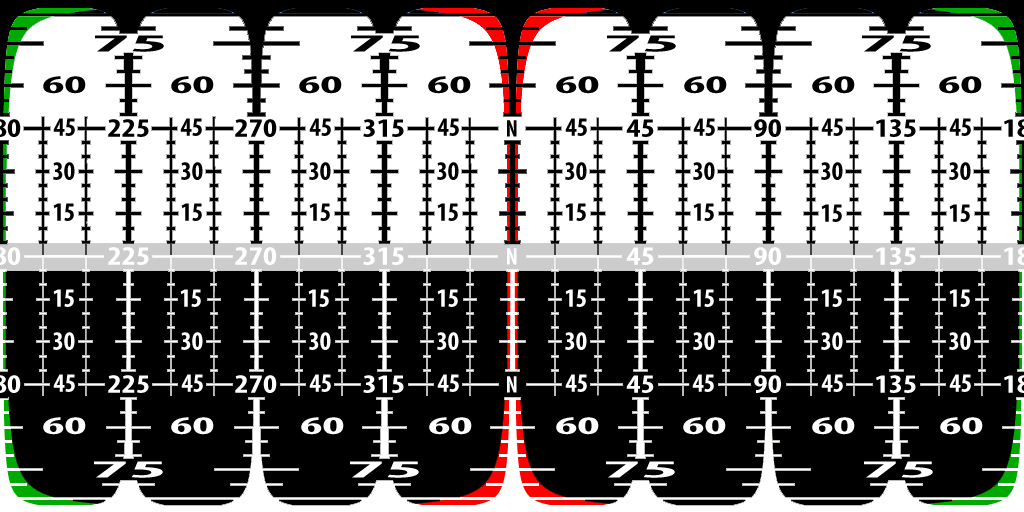
<style>
.page{position:relative;width:1024px;height:512px;background:#000000}
.page>*{position:absolute;margin:0}
.t1{font:24.5px "MyriadPro-BoldCond";color:#000000;scale:3.67 1}
.t2{font:25.5px "MyriadPro-BoldCond";color:#000000;scale:2.06 1}
.t3{font:26.4px "MyriadPro-BoldCond";color:#000000}
.t4{font:26.4px "MyriadPro-BoldCond";color:#000000;scale:1.26 1}
.t5{font:24px "MyriadPro-BoldCond";color:#000000}
.t6{font:26.4px "MyriadPro-BoldCond";color:#ffffff;scale:1.26 1}
.t7{font:24px "MyriadPro-BoldCond";color:#ffffff}
.t8{font:26.4px "MyriadPro-BoldCond";color:#ffffff}
.t9{font:25.5px "MyriadPro-BoldCond";color:#ffffff;scale:2.06 1}
.t10{font:24.5px "MyriadPro-BoldCond";color:#ffffff;scale:3.67 1}
</style>
<div class="page">
<p class="t1" style="left:95px;top:35px;width:69px;height:17px">75</p>
<p class="t1" style="left:351px;top:35px;width:69px;height:17px">75</p>
<p class="t1" style="left:607px;top:35px;width:69px;height:17px">75</p>
<p class="t1" style="left:862px;top:35px;width:69px;height:17px">75</p>
<p class="t2" style="left:43px;top:76px;width:43px;height:18px">60</p>
<p class="t2" style="left:171px;top:76px;width:43px;height:18px">60</p>
<p class="t2" style="left:299px;top:76px;width:43px;height:18px">60</p>
<p class="t2" style="left:428px;top:76px;width:43px;height:18px">60</p>
<p class="t2" style="left:556px;top:76px;width:43px;height:18px">60</p>
<p class="t2" style="left:684px;top:76px;width:43px;height:18px">60</p>
<p class="t2" style="left:812px;top:76px;width:43px;height:18px">60</p>
<p class="t2" style="left:939px;top:76px;width:43px;height:18px">60</p>
<p class="t3" style="left:53px;top:118px;width:22px;height:18px">45</p>
<p class="t4" style="left:108px;top:119px;width:41px;height:18px">225</p>
<p class="t3" style="left:180px;top:118px;width:22px;height:18px">45</p>
<p class="t4" style="left:235px;top:119px;width:42px;height:18px">270</p>
<p class="t3" style="left:309px;top:118px;width:22px;height:18px">45</p>
<p class="t4" style="left:363px;top:119px;width:41px;height:18px">315</p>
<p class="t3" style="left:437px;top:118px;width:22px;height:18px">45</p>
<p class="t5" style="left:507px;top:120px;width:10px;height:17px">N</p>
<p class="t3" style="left:565px;top:118px;width:22px;height:18px">45</p>
<p class="t4" style="left:626px;top:119px;width:28px;height:18px">45</p>
<p class="t3" style="left:693px;top:118px;width:22px;height:18px">45</p>
<p class="t4" style="left:754px;top:119px;width:27px;height:18px">90</p>
<p class="t3" style="left:821px;top:118px;width:22px;height:18px">45</p>
<p class="t4" style="left:876px;top:119px;width:40px;height:18px">135</p>
<p class="t3" style="left:949px;top:118px;width:22px;height:18px">45</p>
<p class="t3" style="left:53px;top:162px;width:22px;height:18px">30</p>
<p class="t3" style="left:181px;top:162px;width:22px;height:18px">30</p>
<p class="t3" style="left:309px;top:162px;width:22px;height:18px">30</p>
<p class="t3" style="left:437px;top:162px;width:22px;height:18px">30</p>
<p class="t3" style="left:565px;top:162px;width:22px;height:18px">30</p>
<p class="t3" style="left:693px;top:162px;width:22px;height:18px">30</p>
<p class="t3" style="left:821px;top:162px;width:22px;height:18px">30</p>
<p class="t3" style="left:949px;top:162px;width:22px;height:18px">30</p>
<p class="t3" style="left:53px;top:203px;width:21px;height:18px">15</p>
<p class="t3" style="left:181px;top:203px;width:21px;height:18px">15</p>
<p class="t3" style="left:309px;top:203px;width:21px;height:18px">15</p>
<p class="t3" style="left:437px;top:203px;width:21px;height:18px">15</p>
<p class="t3" style="left:565px;top:203px;width:21px;height:18px">15</p>
<p class="t3" style="left:693px;top:203px;width:21px;height:18px">15</p>
<p class="t3" style="left:821px;top:204px;width:21px;height:18px">15</p>
<p class="t3" style="left:949px;top:204px;width:21px;height:18px">15</p>
<p class="t6" style="left:108px;top:247px;width:41px;height:18px">225</p>
<p class="t6" style="left:235px;top:247px;width:42px;height:18px">270</p>
<p class="t6" style="left:363px;top:247px;width:41px;height:18px">315</p>
<p class="t7" style="left:507px;top:248px;width:10px;height:17px">N</p>
<p class="t6" style="left:626px;top:247px;width:28px;height:18px">45</p>
<p class="t6" style="left:754px;top:247px;width:27px;height:18px">90</p>
<p class="t6" style="left:876px;top:247px;width:40px;height:18px">135</p>
<p class="t8" style="left:53px;top:289px;width:21px;height:18px">15</p>
<p class="t8" style="left:180px;top:289px;width:21px;height:18px">15</p>
<p class="t8" style="left:308px;top:289px;width:21px;height:18px">15</p>
<p class="t8" style="left:437px;top:289px;width:21px;height:18px">15</p>
<p class="t8" style="left:565px;top:289px;width:21px;height:18px">15</p>
<p class="t8" style="left:693px;top:289px;width:21px;height:18px">15</p>
<p class="t8" style="left:821px;top:289px;width:21px;height:18px">15</p>
<p class="t8" style="left:949px;top:289px;width:21px;height:18px">15</p>
<p class="t8" style="left:53px;top:332px;width:22px;height:18px">30</p>
<p class="t8" style="left:181px;top:332px;width:22px;height:18px">30</p>
<p class="t8" style="left:309px;top:332px;width:22px;height:18px">30</p>
<p class="t8" style="left:437px;top:332px;width:22px;height:18px">30</p>
<p class="t8" style="left:565px;top:332px;width:22px;height:18px">30</p>
<p class="t8" style="left:693px;top:332px;width:22px;height:18px">30</p>
<p class="t8" style="left:821px;top:332px;width:22px;height:18px">30</p>
<p class="t8" style="left:949px;top:332px;width:22px;height:18px">30</p>
<p class="t8" style="left:53px;top:374px;width:22px;height:18px">45</p>
<p class="t6" style="left:108px;top:375px;width:41px;height:18px">225</p>
<p class="t8" style="left:181px;top:374px;width:22px;height:18px">45</p>
<p class="t6" style="left:235px;top:375px;width:42px;height:18px">270</p>
<p class="t8" style="left:309px;top:374px;width:22px;height:18px">45</p>
<p class="t6" style="left:363px;top:375px;width:41px;height:18px">315</p>
<p class="t8" style="left:437px;top:374px;width:22px;height:18px">45</p>
<p class="t7" style="left:507px;top:376px;width:10px;height:17px">N</p>
<p class="t8" style="left:565px;top:374px;width:22px;height:18px">45</p>
<p class="t6" style="left:626px;top:375px;width:28px;height:18px">45</p>
<p class="t8" style="left:692px;top:374px;width:22px;height:18px">45</p>
<p class="t6" style="left:754px;top:375px;width:27px;height:18px">90</p>
<p class="t8" style="left:821px;top:374px;width:22px;height:18px">45</p>
<p class="t6" style="left:876px;top:375px;width:40px;height:18px">135</p>
<p class="t8" style="left:949px;top:374px;width:22px;height:18px">45</p>
<p class="t9" style="left:43px;top:417px;width:43px;height:18px">60</p>
<p class="t9" style="left:171px;top:417px;width:43px;height:18px">60</p>
<p class="t9" style="left:301px;top:417px;width:43px;height:18px">60</p>
<p class="t9" style="left:429px;top:417px;width:43px;height:18px">60</p>
<p class="t9" style="left:556px;top:417px;width:43px;height:18px">60</p>
<p class="t9" style="left:683px;top:417px;width:43px;height:18px">60</p>
<p class="t9" style="left:812px;top:417px;width:43px;height:18px">60</p>
<p class="t9" style="left:940px;top:417px;width:43px;height:18px">60</p>
<p class="t10" style="left:94px;top:461px;width:69px;height:17px">75</p>
<p class="t10" style="left:350px;top:461px;width:69px;height:17px">75</p>
<p class="t10" style="left:606px;top:461px;width:69px;height:17px">75</p>
<p class="t10" style="left:864px;top:461px;width:69px;height:17px">75</p>
</div>
